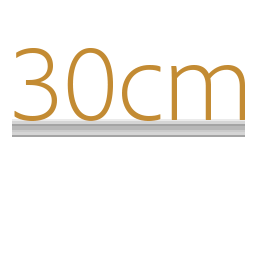
<style>
.page{position:relative;width:256px;height:256px;background:#ffffff}
.page>*{position:absolute;margin:0}
.t1{font:110.8px "AdobeClean-Light";color:#c38b33}
</style>
<div class="page">
<p class="t1" style="left:14px;top:48px;width:231px;height:73px">30cm</p>
</div>
